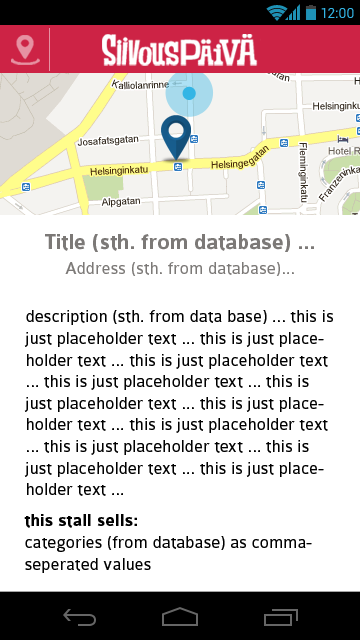
<style>
.page{position:relative;width:360px;height:640px;background:#ffffff}
.page>*{position:absolute;margin:0}
.t1{font:14px "Roboto-Regular";color:#33b5e5}
.t2{font:22px "Colaborate-Bold";color:#7c7977}
.t3{font:18px "Colaborate-Regular";color:#7c7977}
.t4{font:18px "Colaborate-Regular";color:#000000}
.t5{font:18px "Colaborate-Bold";color:#000000}
</style>
<div class="page">
<p class="t1" style="left:321px;top:8px;width:33px;height:10px">12:00</p>
<p class="t2" style="left:45px;top:234px;width:269px;height:18px">Title (sth. from database) ...</p>
<p class="t3" style="left:65px;top:262px;width:229px;height:14px">Address (sth. from database)...</p>
<p class="t4" style="left:24px;top:310px;width:309px;height:186px">description (sth. from data base) ... this is just placeholder text ... this is just placeholder text ... this is just placeholder text ... this is just placeholder text ... this is just placeholder text ... this is just placeholder text ... this is just placeholder text ... this is just placeholder text ... this is just placeholder text ... this is just placeholder text ...</p>
<p class="t4" style="left:24px;top:514px;width:288px;height:59px"><span class="t5">this stall sells:<br></span>categories (from database) as comma-seperated values</p>
</div>
